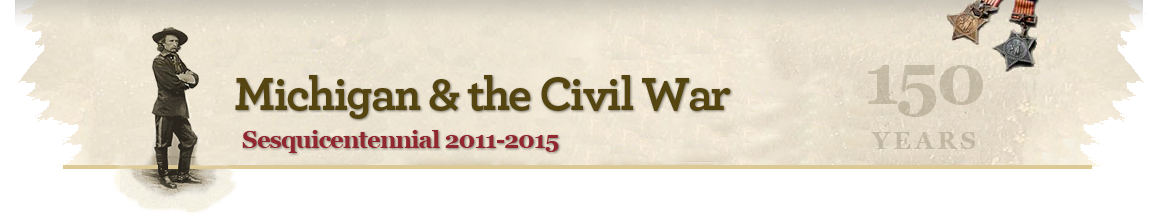
<style>
.page{position:relative;width:1160px;height:219px;background:#ffffff}
.page>*{position:absolute;margin:0}
.t1{font:72px "Georgia-Bold";letter-spacing:-0.04em;color:#c4baa5}
.t2{font:48px "Archer-Bold";letter-spacing:-0.04em;color:#554511}
.t3{font:24px "Georgia-Bold";letter-spacing:-0.04em;color:#92272f}
.t4{font:24px "Georgia-Bold";letter-spacing:-0.04em;color:#c3b9a3}
</style>
<div class="page">
<p class="t1" style="left:868px;top:65px;width:115px;height:52px">150</p>
<p class="t2" style="left:235px;top:75px;width:496px;height:44px">Michigan &amp; the Civil War</p>
<p class="t3" style="left:242px;top:130px;width:317px;height:23px">Sesquicentennial 2011-2015</p>
<p class="t4" style="left:871px;top:132px;width:105px;height:17px">Y E A R S</p>
</div>
